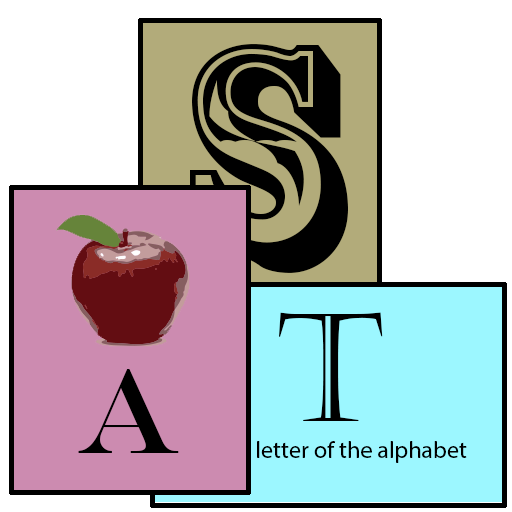
<style>
.page{position:relative;width:512px;height:512px;background:#ffffff}
.page>*{position:absolute;margin:0}
.t1{font:300px "RosewoodStd-Regular";color:#000000}
.t2{font:150px "Castellar";color:#000000}
.t3{font:120px "EngraversMT";color:#000000}
.t4{font:24px "MyriadPro-Regular";color:#000000}
</style>
<div class="page">
<p class="t1" style="left:190px;top:44px;width:158px;height:229px">S</p>
<p class="t2" style="left:279px;top:312px;width:104px;height:109px">T</p>
<p class="t3" style="left:78px;top:369px;width:101px;height:84px">a</p>
<p class="t4" style="left:257px;top:441px;width:210px;height:22px">letter of the alphabet</p>
</div>
